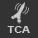
<style>
.page{position:relative;width:38px;height:38px;background:#333333}
.page>*{position:absolute;margin:0}
.t1{font:9.9px "Arial-BoldMT";color:#cbcbcb;scale:1.09 1}
</style>
<div class="page">
<p class="t1" style="left:7px;top:26px;width:23px;height:7px">TCA</p>
</div>
